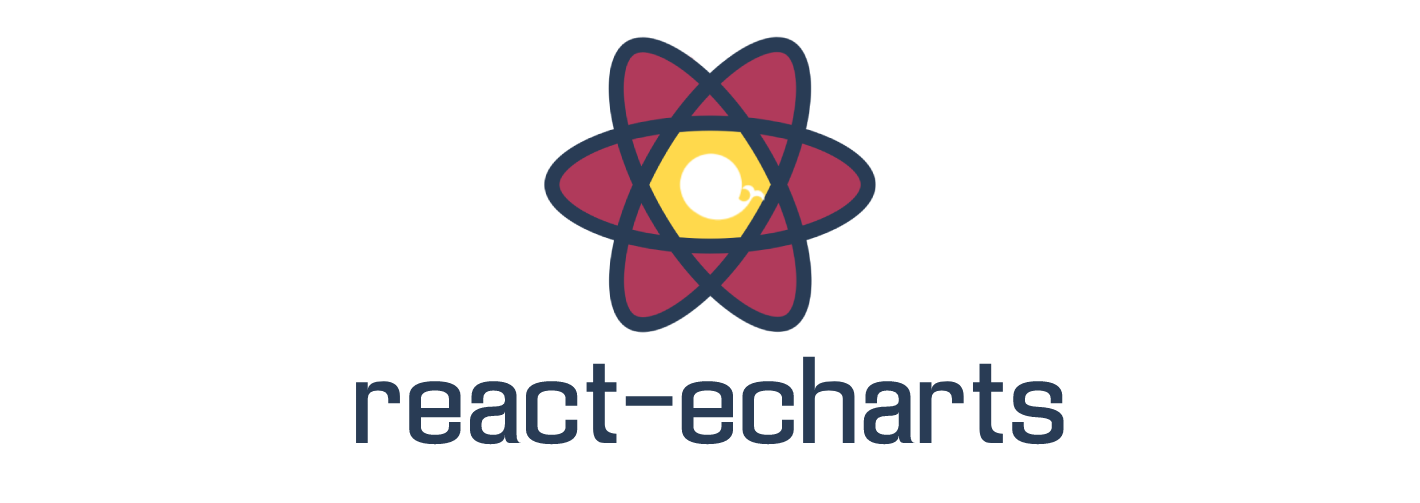
<style>
.page{position:relative;width:1420px;height:503px;background:#ffffff}
.page>*{position:absolute;margin:0}
.t1{font:112px "Enigmatic";color:#293c55}
</style>
<div class="page">
<p class="t1" style="left:356px;top:356px;width:708px;height:89px">react-echarts</p>
</div>
